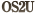
<style>
.page{position:relative;width:49px;height:13px;background:#ffffff}
.page>*{position:absolute;margin:0}
.t1{font:15px "RyuminPro-ExBold";letter-spacing:-0.06em;color:#4a3f32;font-weight:bold;scale:0.9 1}
</style>
<div class="page">
<p class="t1" style="left:1px;top:0px;width:34px;height:13px">OS2U</p>
</div>
